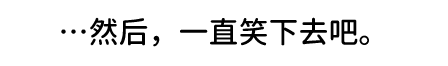
<style>
.page{position:relative;width:448px;height:66px;background:#ffffff}
.page>*{position:absolute;margin:0}
.t1{font:30px "Resource-Han-Rounded-CN-Medium";color:#000000}
</style>
<div class="page">
<p class="t1" style="left:61px;top:17px;width:308px;height:30px">…然后，一直笑下去吧。</p>
</div>
